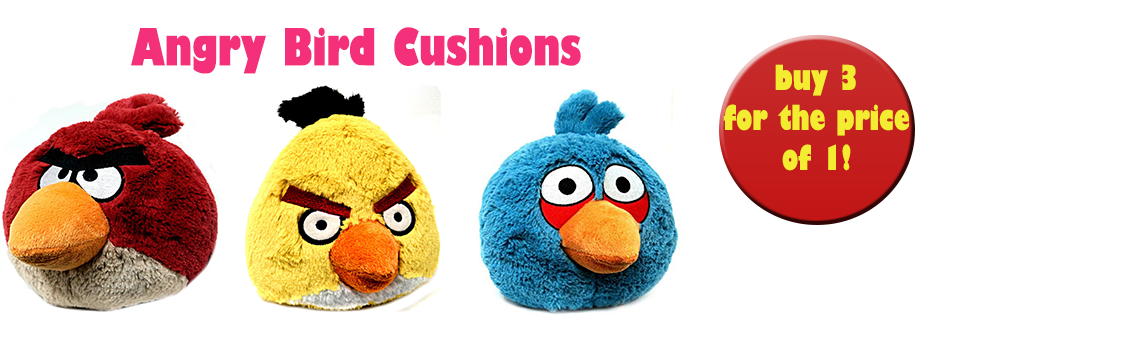
<style>
.page{position:relative;width:1140px;height:350px;background:#ffffff}
.page>*{position:absolute;margin:0}
.t1{font:50px "GillSans-UltraBoldCondensed";color:#f33079}
.t2{font:33.3px "GillSans-UltraBoldCondensed";color:#f3ec30}
</style>
<div class="page">
<p class="t1" style="left:131px;top:27px;width:450px;height:47px">Angry Bird Cushions</p>
<p class="t2" style="left:723px;top:64px;width:186px;height:107px;text-align:center">buy 3<br>for the price of 1!</p>
</div>
